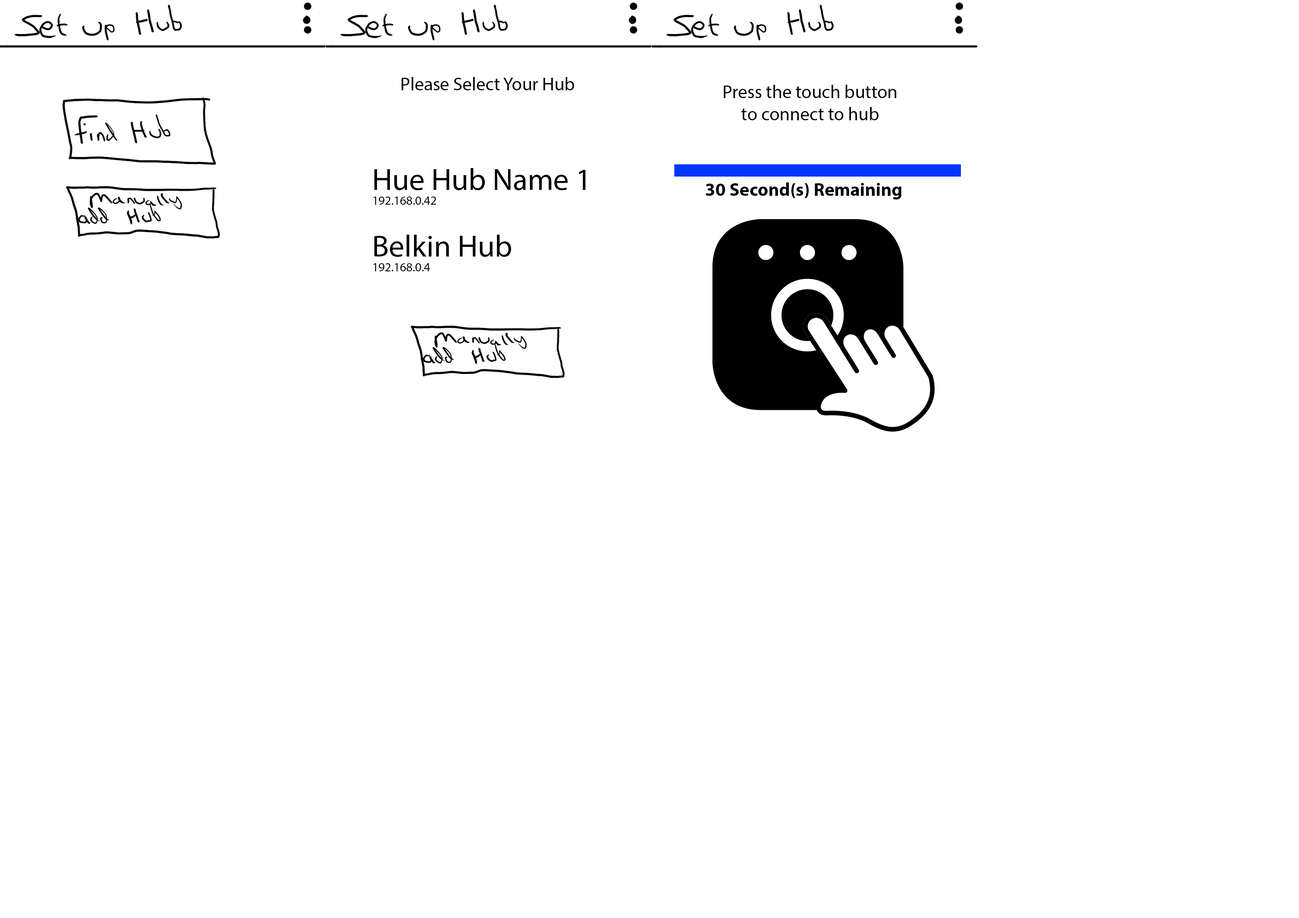
<style>
.page{position:relative;width:1299px;height:918px;background:#ffffff}
.page>*{position:absolute;margin:0}
.t1{font:18.5px "MyriadPro-Regular";color:#020202}
.t2{font:4.4px "MyriadPro-Regular";color:#020202}
.t3{font:30.9px "MyriadPro-Regular";color:#020202}
.t4{font:12.3px "MyriadPro-Regular";color:#020202}
.t5{font:4.4px "MyriadPro-Bold";color:#020202}
</style>
<div class="page">
<p class="t1" style="left:401px;top:77px;width:173px;height:13px">Please Select Your Hub</p>
<p class="t2" style="left:723px;top:85px;width:173px;height:35px;text-align:center">Press the touch button<br>to connect to hub</p>
<p class="t3" style="left:373px;top:168px;width:212px;height:37px">Hue Hub Name 1<br><span class="t4">192.168.0.42</span></p>
<p class="t5" style="left:706px;top:183px;width:195px;height:17px;text-align:center">30 Second(s) Remaining</p>
<p class="t4" style="left:373px;top:235px;width:138px;height:36px"><span class="t3">Belkin Hub<br></span>192.168.0.4</p>
</div>
